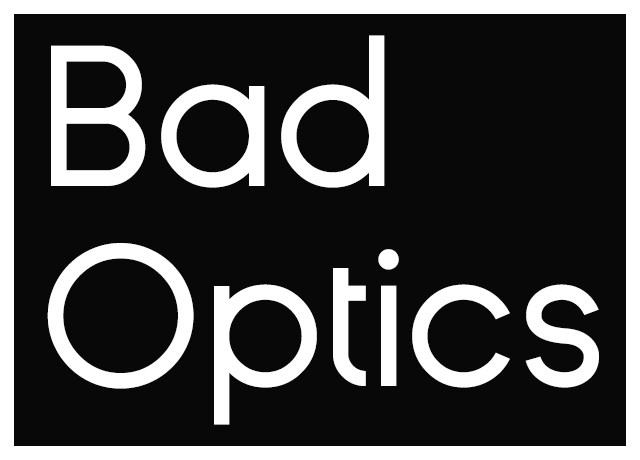
<style>
.page{position:relative;width:640px;height:460px;background:#080808}
.page>*{position:absolute;margin:0}
.t1{font:200px/200px "GinoraSans-Regular";letter-spacing:-0.02em;color:#ffffff}
</style>
<div class="page">
<p class="t1" style="left:47px;top:35px;width:552px;height:390px">Bad<br>Optics</p>
</div>
